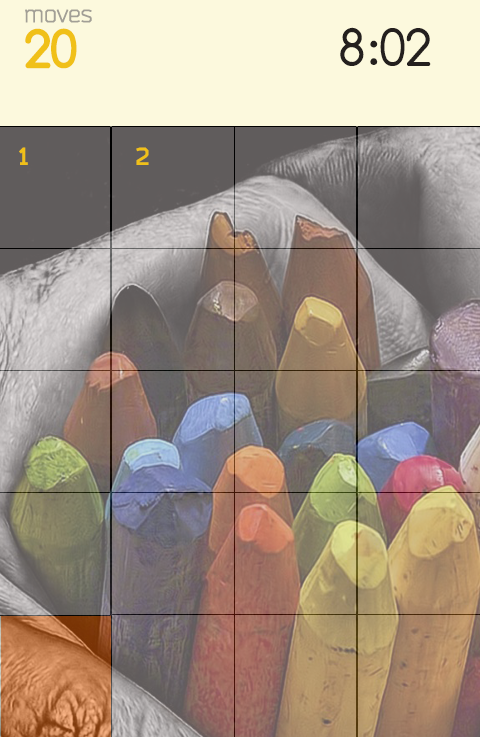
<style>
.page{position:relative;width:480px;height:737px}
.page>*{position:absolute;margin:0}
.t1{font:24px "Bender";color:#a29f96}
.t2{font:54px "Comfortaa-Bold";color:#f0c018}
.t3{font:54px "Comfortaa";color:#24201e}
.t4{font:24px "Bender-Bold";color:#f0c018}
</style>
<div class="page">
<p class="t1" style="left:25px;top:9px;width:67px;height:14px">moves</p>
<p class="t2" style="left:25px;top:28px;width:52px;height:41px">20</p>
<p class="t3" style="left:340px;top:27px;width:91px;height:39px">8:02</p>
<p class="t4" style="left:19px;top:147px;width:9px;height:18px">1</p>
<p class="t4" style="left:136px;top:147px;width:13px;height:18px">2</p>
</div>
